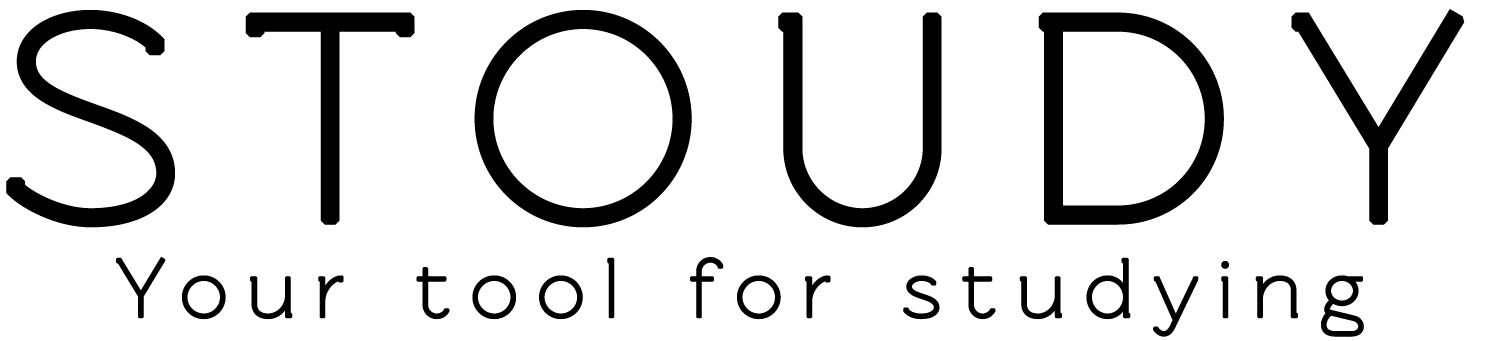
<style>
.page{position:relative;width:1493px;height:341px;background:#ffffff}
.page>*{position:absolute;margin:0}
.t1{font:300px "RawengulkRegular";letter-spacing:0.2em;color:#000000;font-weight:bold}
.t2{font:85.4px "RawengulkRegular";letter-spacing:0.2em;color:#000000;font-weight:bold}
</style>
<div class="page">
<p class="t1" style="left:6px;top:9px;width:1459px;height:219px">STOUDY</p>
<p class="t2" style="left:116px;top:256px;width:1248px;height:81px">Your tool for studying</p>
</div>
